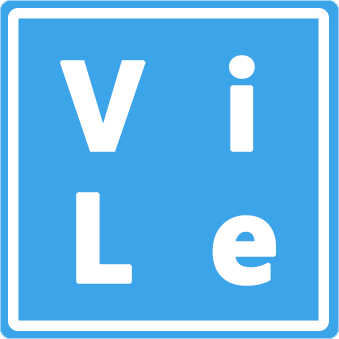
<style>
.page{position:relative;width:339px;height:339px;background:#3ca5ea}
.page>*{position:absolute;margin:0}
.t1{font:125px "Ebrima-Bold";color:#ffffff;font-weight:bold}
.t2{font:150px "Ebrima-Bold";color:#ffffff;font-weight:bold}
</style>
<div class="page">
<p class="t1" style="left:59px;top:55px;width:196px;height:97px">V  i</p>
<p class="t1" style="left:76px;top:192px;width:200px;height:94px"><span class="t2"><br></span>L  e</p>
</div>
